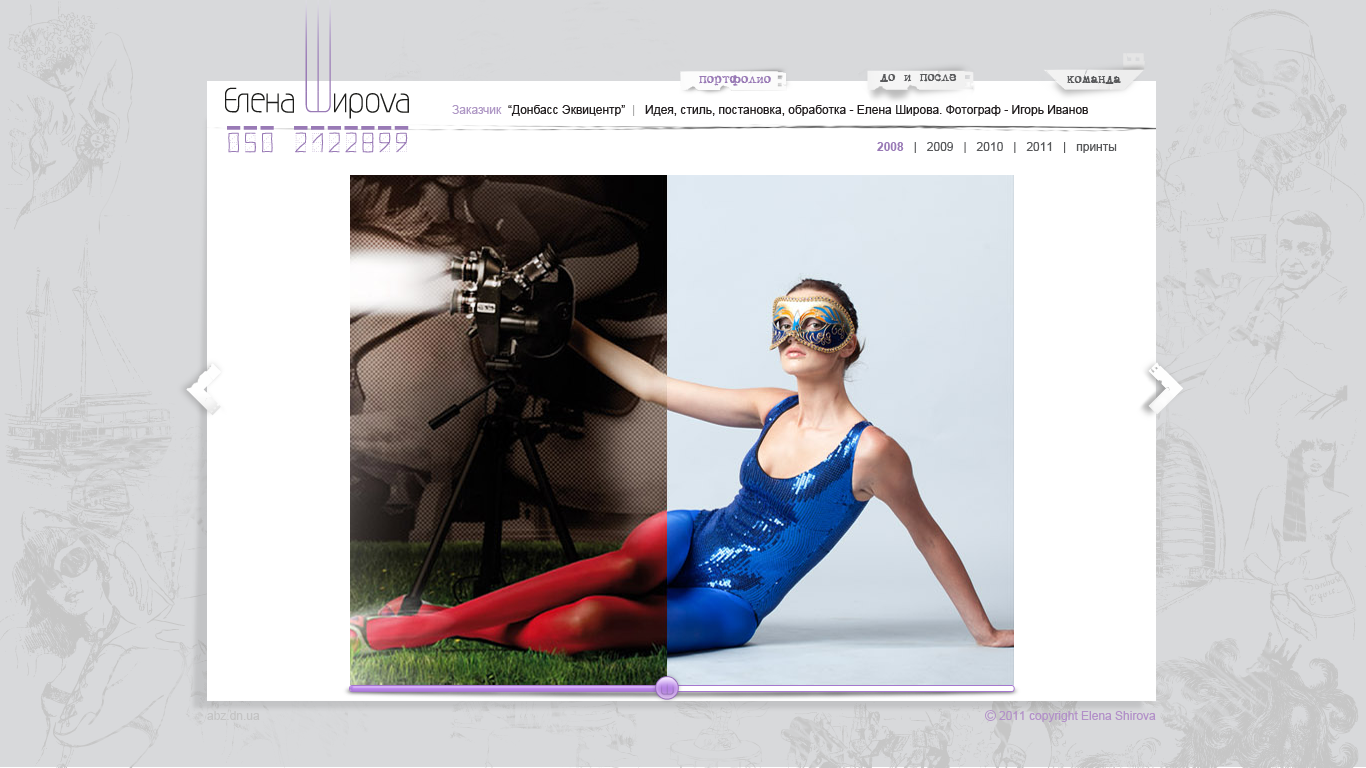
<style>
.page{position:relative;width:1366px;height:768px;background:#d8d9db}
.page>*{position:absolute;margin:0}
.t1{font:14px "DSVTCoronaCyr";color:#997ab6}
.t2{font:14px "DSVTCoronaCyr";color:#58595b}
.t3{font:12px "ArialMT";color:#231f20}
.t4{font:12px "ArialMT";color:#af98c5}
.t5{font:12px "ArialMT";color:#adadad}
.t6{font:12px "ArialMT";color:#58595b}
.t7{font:12px "Arial-BoldMT";color:#997ab6}
.t8{font:12px "ArialMT";color:#c2c2c2}
.t9{font:12px "ArialMT";color:#b290c8}
</style>
<div class="page">
<p class="t1" style="left:699px;top:75px;width:72px;height:11px">портфолио</p>
<p class="t1" style="left:699px;top:75px;width:72px;height:11px">портфолио</p>
<p class="t2" style="left:880px;top:74px;width:77px;height:8px">до и после</p>
<p class="t2" style="left:1067px;top:76px;width:54px;height:8px">команда</p>
<p class="t3" style="left:452px;top:105px;width:636px;height:11px"><span class="t4">Заказчик  </span>“Донбасс Эквицентр”  <span class="t5">|</span>   Идея, стиль, постановка, обработка - Елена Широва. Фотограф - Игорь Иванов</p>
<p class="t6" style="left:877px;top:142px;width:240px;height:11px"><span class="t7">2008</span>   |   2009   |   2010   |   2011   |   принты</p>
<p class="t8" style="left:207px;top:711px;width:53px;height:9px">abz.dn.ua</p>
<p class="t9" style="left:999px;top:711px;width:157px;height:11px">2011 copyright Elena Shirova</p>
</div>
